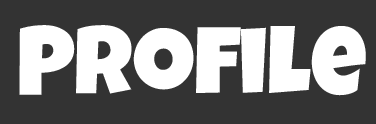
<style>
.page{position:relative;width:376px;height:124px;background:#333333}
.page>*{position:absolute;margin:0}
.t1{font:96.2px "LuckiestGuy-Regular";color:#ffffff}
</style>
<div class="page">
<p class="t1" style="left:19px;top:25px;width:347px;height:71px">Profile</p>
</div>
